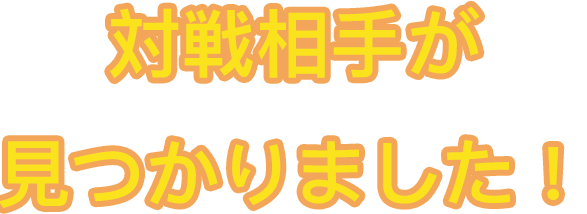
<style>
.page{position:relative;width:587px;height:214px;background:#ffffff}
.page>*{position:absolute;margin:0}
.t1{font:74.4px "PingFangHK-Semibold";color:#fae31c}
</style>
<div class="page">
<p class="t1" style="left:0px;top:6px;width:559px;height:202px;text-align:center">対戦相手が<br>見つかりました！</p>
</div>
